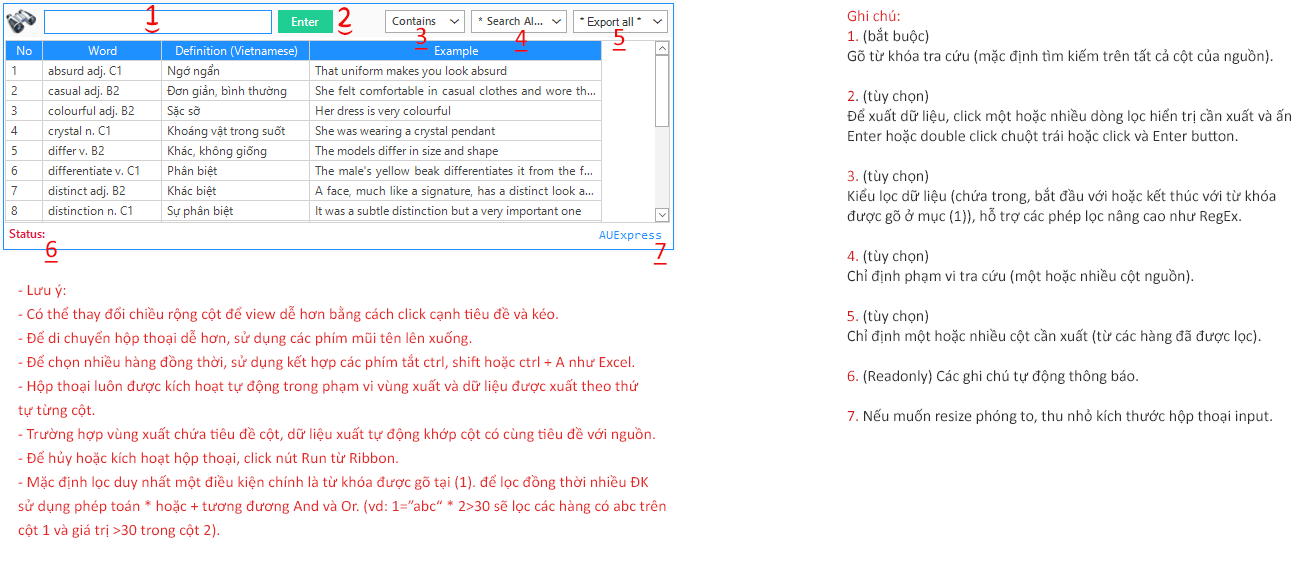
<style>
.page{position:relative;width:1300px;height:572px;background:#ffffff}
.page>*{position:absolute;margin:0}
.t1{font:25.3px "Calibri";color:#f00a0a;text-decoration:underline}
.t2{font:16px/20px "Calibri";color:#2e2e2e}
.t3{font:16px/34.7px "Calibri";color:#e42727}
.t4{font:16px/20px "Calibri";color:#ce1b1b}
.t5{font:16px/20px "Calibri";color:#cf1b1b}
.t6{font:15.8px/24px "Calibri";color:#e42727}
.t7{font:15.8px/26.7px "Calibri";color:#e42727}
</style>
<div class="page">
<p class="t1" style="left:145px;top:5px;width:15px;height:28px">1</p>
<p class="t1" style="left:338px;top:7px;width:15px;height:28px">2</p>
<p class="t2" style="left:847px;top:10px;width:444px;height:414px"><span class="t3">Ghi chú:<br></span><span class="t4">1.</span> (bắt buộc) <br>Gõ từ khóa tra cứu (mặc định tìm kiếm trên tất cả cột của nguồn).<br><br><span class="t5">2</span>. (tùy chọn)<br>Để xuất dữ liệu, click một hoặc nhiều dòng lọc hiển trị cần xuất và ấn <br>Enter hoặc double click chuột trái hoặc click và Enter button.<br><br><span class="t5">3.</span> (tùy chọn) <br>Kiểu lọc dữ liệu (chứa trong, bắt đầu với hoặc kết thúc với từ khóa<br>được gõ ở mục (1)), hỗ trợ các phép lọc nâng cao như RegEx.<br><br><span class="t5">4.</span> (tùy chọn)<br>Chỉ định phạm vi tra cứu (một hoặc nhiều cột nguồn).<br><br><span class="t5">5.</span> (tùy chọn)<br>Chỉ định một hoặc nhiều cột cần xuất (từ các hàng đã được lọc).<br><br><span class="t5">6.</span> (Readonly) Các ghi chú tự động thông báo.<br><br><span class="t5">7.</span> Nếu muốn resize phóng to, thu nhỏ kích thước hộp thoại input.</p>
<p class="t1" style="left:414px;top:27px;width:14px;height:23px">3</p>
<p class="t1" style="left:514px;top:30px;width:14px;height:22px">4</p>
<p class="t1" style="left:612px;top:29px;width:14px;height:22px">5</p>
<p class="t1" style="left:44px;top:240px;width:14px;height:23px">6</p>
<p class="t1" style="left:653px;top:243px;width:14px;height:22px">7</p>
<p class="t6" style="left:18px;top:284px;width:648px;height:254px">- Lưu ý:<br>- Có thể thay đổi chiều rộng cột để view dễ hơn bằng cách click cạnh tiêu đề và kéo.<br>- Để di chuyển hộp thoại dễ hơn, sử dụng các phím mũi tên lên xuống.<br>- Để chọn nhiều hàng đồng thời, sử dụng kết hợp các phím tắt ctrl, shift hoặc ctrl + A như Excel.<br>- Hộp thoại luôn được kích hoạt tự động trong phạm vi vùng xuất và dữ liệu được xuất theo thứ<br>tự từng cột.<br>- Trường hợp vùng xuất chứa tiêu đề cột, dữ liệu xuất tự động khớp cột có cùng tiêu đề với nguồn.<br>- Để hủy hoặc kích hoạt hộp thoại, click nút Run từ Ribbon.<br>- Mặc định lọc duy nhất một điều kiện chính là từ khóa được gõ tại (1). để lọc đồng thời nhiều ĐK<br>sử dụng phép toán * hoặc + tương đương And và Or. (vd: 1=”abc“ * 2&gt;30 sẽ lọc các hàng có abc trên<br>cột 1 và giá trị &gt;30 trong cột 2).<br><span class="t7"></span></p>
</div>
